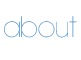
<style>
.page{position:relative;width:81px;height:60px;background:#ffffff}
.page>*{position:absolute;margin:0}
.t1{font:20.8px "BondoluoPeek";color:#438bc9}
</style>
<div class="page">
<p class="t1" style="left:4px;top:16px;width:73px;height:22px">About</p>
</div>
